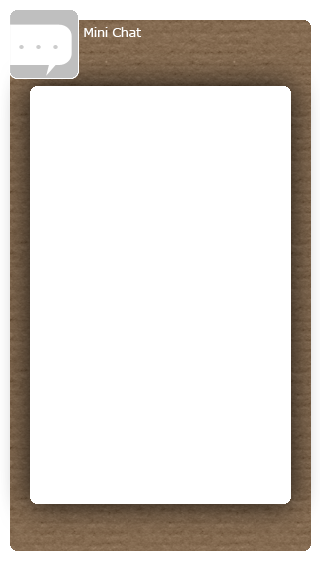
<style>
.page{position:relative;width:320px;height:570px;background:#ffffff}
.page>*{position:absolute;margin:0}
.t1{font:12.6px "MSReferenceSansSerif";letter-spacing:-0.025em;color:#ffffff}
</style>
<div class="page">
<p class="t1" style="left:84px;top:27px;width:57px;height:10px">Mini Chat</p>
</div>
